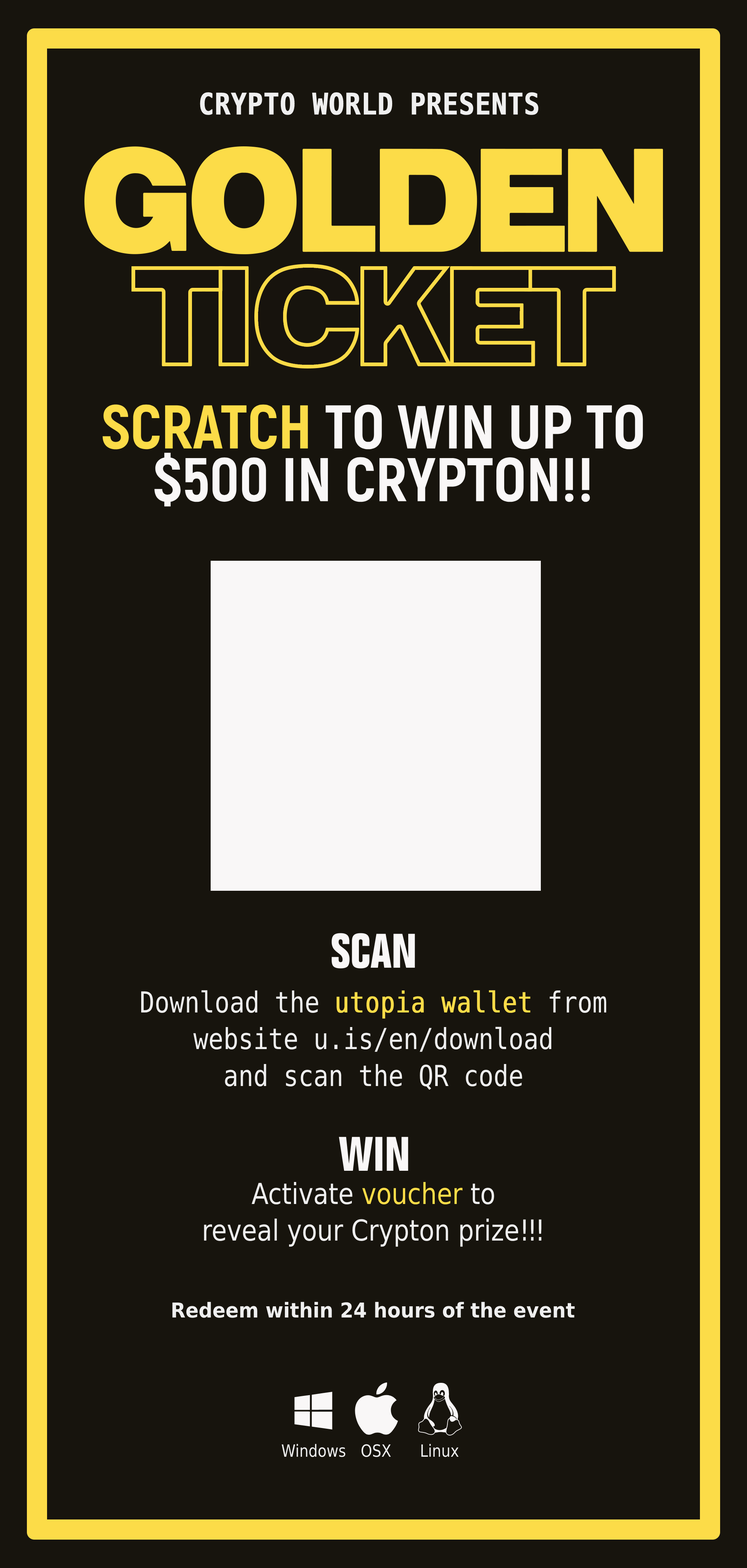
<style>
.page{position:relative;width:747px;height:1568px;background:#17140d}
.page>*{position:absolute;margin:0}
.t1{font:29.9px "DejaVuSansMono-Bold";color:#efefef;text-transform:uppercase;font-weight:bold;scale:0.86 1}
.t2{font:61.6px/52.7px "Akrobat-ExtraBold";color:#f9f7f7;text-transform:uppercase}
.t3{font:61.6px/52.7px "Akrobat-ExtraBold";color:#fcdc48;text-transform:uppercase}
.t4{font:47.4px "FolioStd-BoldCondensed";color:#f9f7f7;text-transform:uppercase}
.t5{font:29px/36.9px "DejaVuSansMono";color:#efefef;scale:0.86 1}
.t6{font:29px/36.9px "DejaVuSansMono";color:#fcdc48;font-weight:bold;scale:0.83 1}
.t7{font:29px/36.9px "FolioStd-Medium";color:#efefef;scale:0.86 1}
.t8{font:29px/36.9px "FolioStd-Medium";color:#fcdc48;scale:0.86 1}
.t9{font:29px/36.9px "FolioStd-Medium";letter-spacing:-0.075em;color:#efefef;scale:0.86 1}
.t10{font:20.5px "CarosSoftBold";color:#efefef;scale:0.94 1}
.t11{font:16.9px "FolioStd-Medium";color:#efefef;scale:0.86 1}
</style>
<div class="page">
<p class="t1" style="left:200px;top:92px;width:338px;height:23px">CRYPTO WORLD PRESENTS</p>
<p class="t2" style="left:102px;top:404px;width:541px;height:103px;text-align:center"><span class="t3">Scratch</span> to win up to<br>$500 in CRYPTON!!</p>
<p class="t4" style="left:332px;top:933px;width:83px;height:35px">Scan</p>
<p class="t5" style="left:141px;top:990px;width:465px;height:100px;text-align:center">Download the <span class="t6">utopia wallet</span> from<br>website u.is/en/download<br>and scan the QR code</p>
<p class="t4" style="left:339px;top:1137px;width:69px;height:34px">Win</p>
<p class="t7" style="left:204px;top:1182px;width:337px;height:65px;text-align:center">Activate <span class="t8">voucher</span> to<br>reveal your Crypton prize<span class="t9">!!!</span></p>
<p class="t10" style="left:172px;top:1302px;width:403px;height:16px">Redeem within 24 hours of the event</p>
<p class="t11" style="left:281px;top:1444px;width:64px;height:13px">Windows</p>
<p class="t11" style="left:361px;top:1444px;width:30px;height:13px">OSX</p>
<p class="t11" style="left:421px;top:1444px;width:37px;height:13px">Linux</p>
</div>
